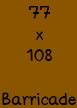
<style>
.page{position:relative;width:77px;height:108px;background:#8b5500}
.page>*{position:absolute;margin:0}
.t1{font:18px "korbau-Medium";color:#000000}
</style>
<div class="page">
<p class="t1" style="left:26px;top:6px;width:26px;height:55px;text-align:center">77<br>x<br>108</p>
<p class="t1" style="left:2px;top:92px;width:74px;height:13px">Barricade</p>
</div>
